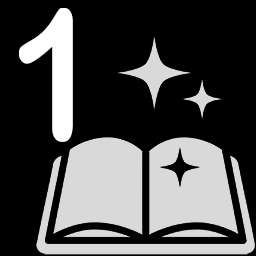
<style>
.page{position:relative;width:256px;height:256px;background:#000000}
.page>*{position:absolute;margin:0}
.t1{font:182.4px "ArialRoundedMTBold";letter-spacing:-0.4em;color:#ffffff;font-variant:small-caps;scale:0.83 1}
</style>
<div class="page">
<p class="t1" style="left:19px;top:8px;width:54px;height:134px">1</p>
</div>
